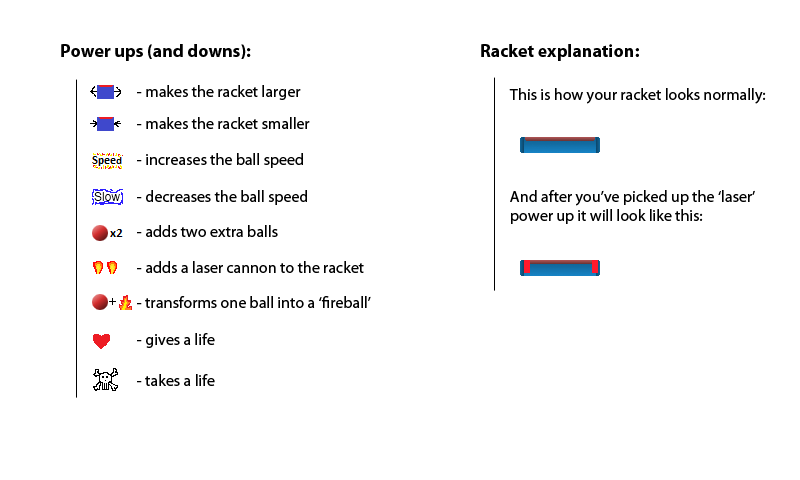
<style>
.page{position:relative;width:800px;height:480px;background:#ffffff}
.page>*{position:absolute;margin:0}
.t1{font:18px "MyriadPro-Bold";color:#000000}
.t2{font:16px "MyriadPro-Regular";color:#000000}
</style>
<div class="page">
<p class="t1" style="left:61px;top:44px;width:190px;height:17px">Power ups (and downs):</p>
<p class="t1" style="left:481px;top:44px;width:158px;height:17px">Racket explanation:</p>
<p class="t2" style="left:137px;top:85px;width:164px;height:15px">- makes the racket larger</p>
<p class="t2" style="left:509px;top:88px;width:257px;height:16px">This is how your racket looks normally:</p>
<p class="t2" style="left:137px;top:117px;width:173px;height:12px">- makes the racket smaller</p>
<p class="t2" style="left:137px;top:153px;width:166px;height:15px">- increases the ball speed</p>
<p class="t2" style="left:137px;top:190px;width:170px;height:15px">- decreases the ball speed</p>
<p class="t2" style="left:510px;top:190px;width:245px;height:34px">And after you’ve picked up the ‘laser’<br>power up it will look like this:</p>
<p class="t2" style="left:137px;top:225px;width:141px;height:12px">- adds two extra balls</p>
<p class="t2" style="left:137px;top:261px;width:227px;height:12px">- adds a laser cannon to the racket</p>
<p class="t2" style="left:137px;top:296px;width:234px;height:12px">- transforms one ball into a ‘fireball’</p>
<p class="t2" style="left:137px;top:333px;width:78px;height:15px">- gives a life</p>
<p class="t2" style="left:137px;top:374px;width:78px;height:12px">- takes a life</p>
</div>
